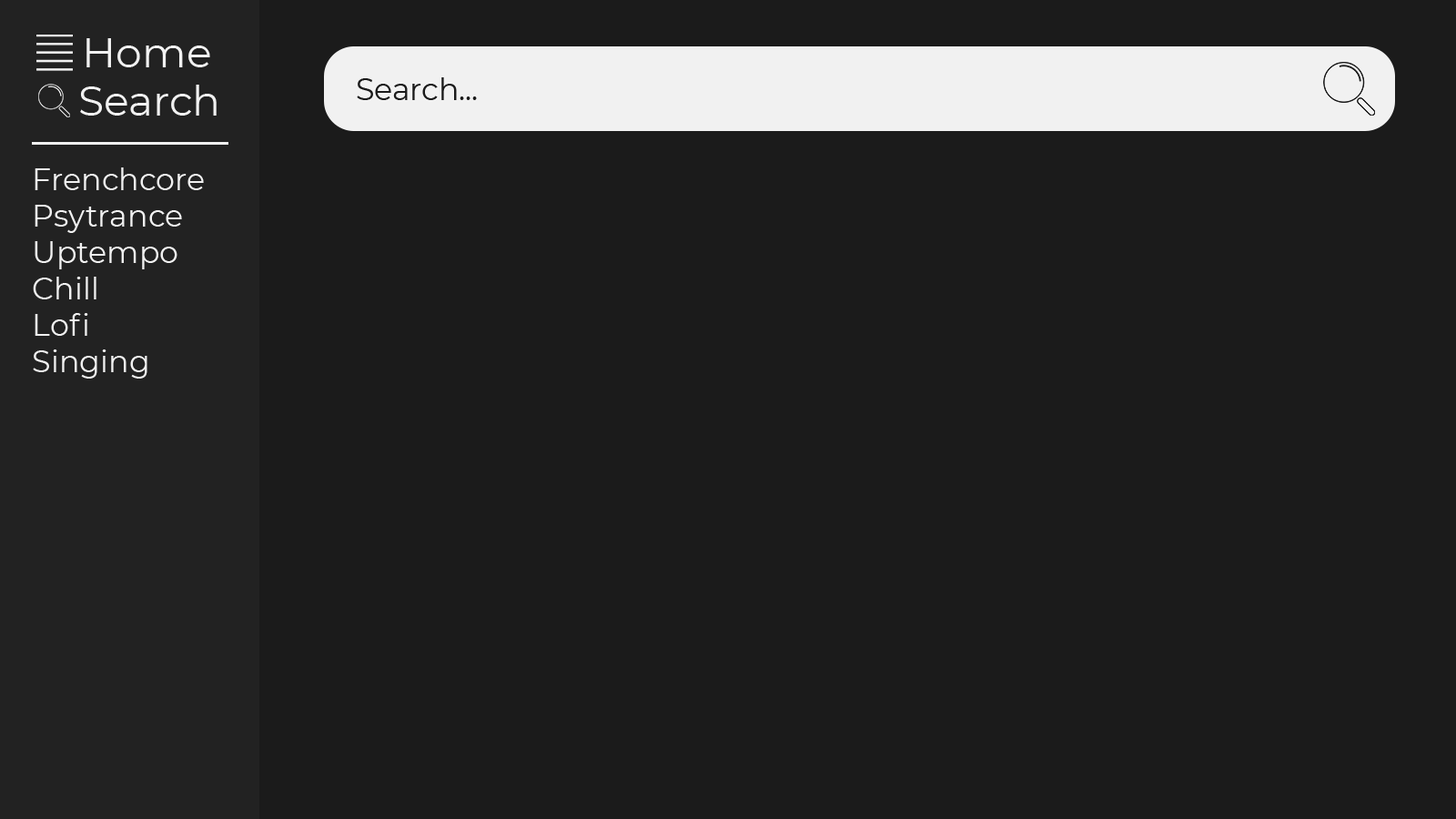
<style>
.page{position:relative;width:1456px;height:819px;background:#1b1b1b}
.page>*{position:absolute;margin:0}
.t1{font:41.7px "Montserrat-Regular";color:#f1f1f1}
.t2{font:30.3px "Montserrat-Regular";color:#1a1a1a}
.t3{font:30.3px "Montserrat-Regular";color:#f1f1f1}
</style>
<div class="page">
<p class="t1" style="left:86px;top:38px;width:124px;height:29px">Home</p>
<p class="t2" style="left:357px;top:77px;width:120px;height:23px">Search...</p>
<p class="t1" style="left:80px;top:85px;width:137px;height:31px">Search</p>
<p class="t3" style="left:33px;top:167px;width:171px;height:212px">Frenchcore<br>Psytrance<br>Uptempo<br>Chill<br>Lofi<br>Singing</p>
</div>
